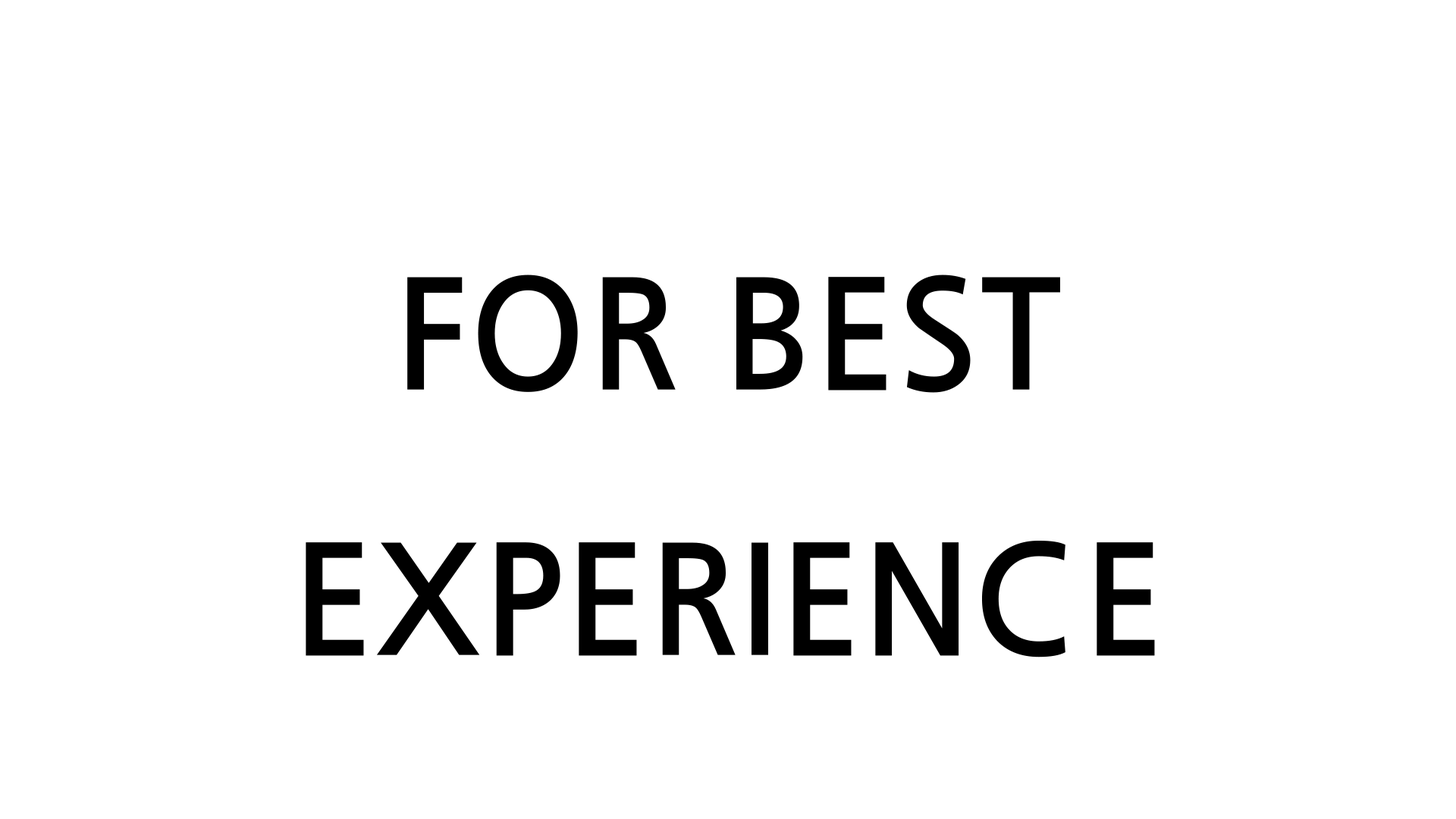
<style>
.page{position:relative;width:1456px;height:819px;background:#ffffff}
.page>*{position:absolute;margin:0}
.t1{font:151.7px "JejuGothic";color:#000000}
.t2{font:75.8px "JejuGothic";color:#000000}
</style>
<div class="page">
<p class="t1" style="left:306px;top:275px;width:849px;height:382px;text-align:center"><span class="t2"><br><br></span>FOR BEST<br>EXPERIENCE</p>
</div>
